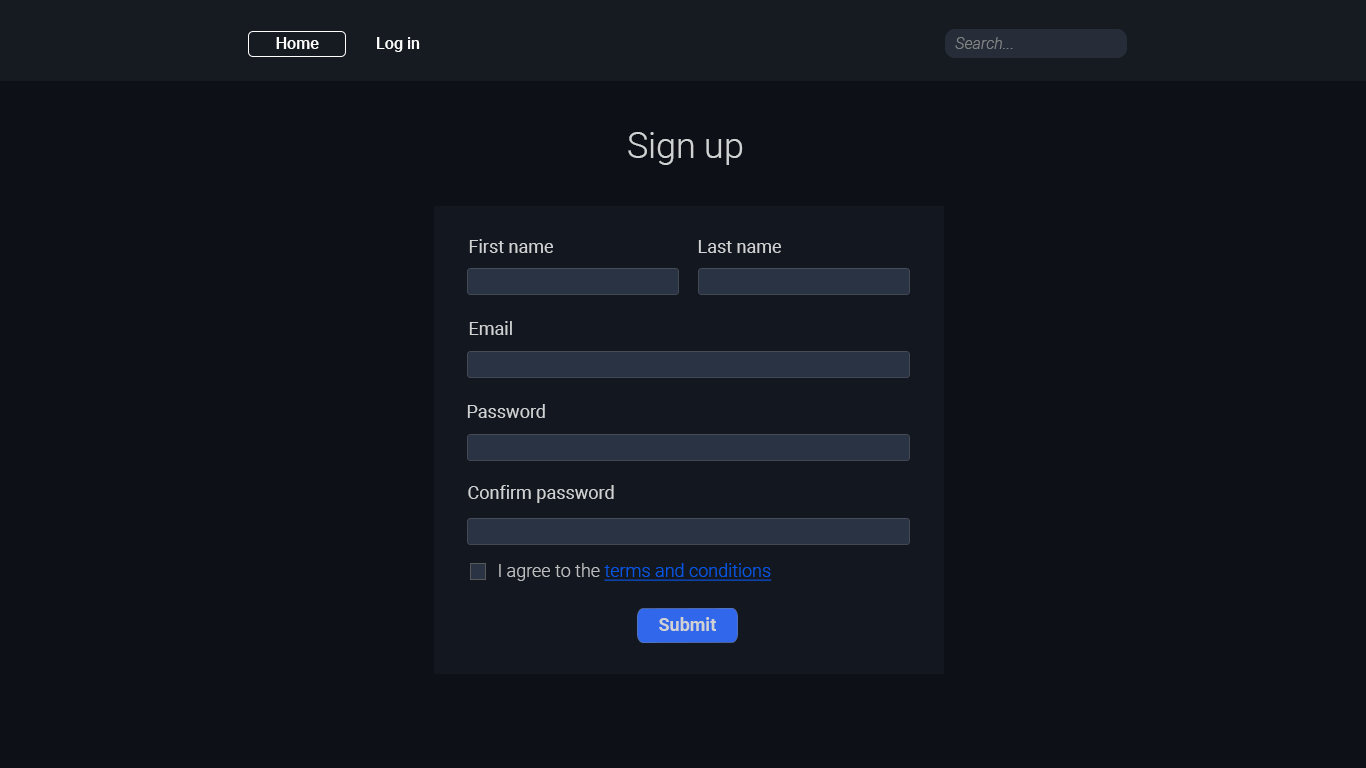
<style>
.page{position:relative;width:1366px;height:768px;background:#0d1117}
.page>*{position:absolute;margin:0}
.t1{font:16px "Roboto-Medium";color:#ffffff}
.t2{font:16px "Roboto-LightItalic";color:#808283}
.t3{font:36px "Roboto-Light";color:#d0d1d2}
.t4{font:18px "Roboto-Regular";color:#d0d1d2}
.t5{font:18px "Roboto-Light";color:#0756e1;text-decoration:underline}
.t6{font:18px "Roboto-Light";color:#bcbdbf}
.t7{font:18px "Roboto-Bold";color:#d0d1d2}
</style>
<div class="page">
<p class="t1" style="left:276px;top:37px;width:43px;height:12px">Home</p>
<p class="t1" style="left:377px;top:37px;width:43px;height:15px">Log in</p>
<p class="t2" style="left:955px;top:37px;width:58px;height:12px">Search...</p>
<p class="t3" style="left:628px;top:132px;width:115px;height:33px">Sign up</p>
<p class="t4" style="left:469px;top:239px;width:84px;height:14px">First name</p>
<p class="t4" style="left:698px;top:240px;width:83px;height:13px">Last name</p>
<p class="t4" style="left:469px;top:321px;width:43px;height:14px">Email</p>
<p class="t4" style="left:467px;top:404px;width:78px;height:14px">Password</p>
<p class="t4" style="left:468px;top:485px;width:146px;height:18px">Confirm password</p>
<p class="t5" style="left:499px;top:563px;width:273px;height:18px"><span class="t6">I agree to the </span>terms and conditions</p>
<p class="t7" style="left:659px;top:617px;width:57px;height:14px">Submit</p>
</div>
